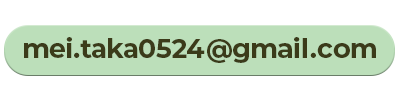
<style>
.page{position:relative;width:400px;height:100px;background:#ffffff}
.page>*{position:absolute;margin:0}
.t1{font:26.8px "Montserrat-Bold";letter-spacing:-0.04em;color:#3b3b1a}
.t2{font:26.8px "Montserrat-Bold";color:#3b3b1a}
.t3{font:26.8px "Montserrat-Bold";letter-spacing:0.04em;color:#3b3b1a}
.t4{font:26.8px "Montserrat-Bold";letter-spacing:0.02em;color:#3b3b1a}
</style>
<div class="page">
<p class="t1" style="left:24px;top:37px;width:352px;height:26px">me<span class="t2">i.</span>taka0<span class="t2">5</span>2<span class="t3">4</span>@gma<span class="t2">i</span><span class="t4">l.</span><span class="t2">c</span>om</p>
</div>
